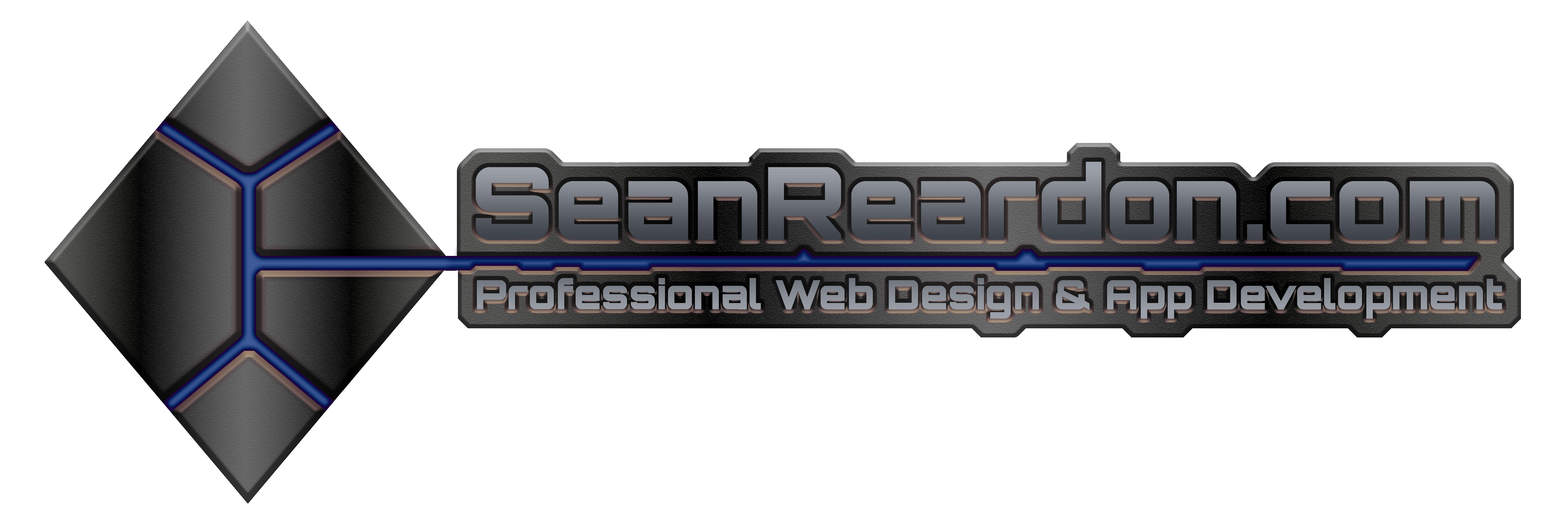
<style>
.page{position:relative;width:1568px;height:521px;background:#ffffff}
.page>*{position:absolute;margin:0}
.t1{font:101px "Orbitron-Black"}
.t2{font:40.4px "Orbitron-Black";color:#8a8e96}
</style>
<div class="page">
<p class="t1" style="left:476px;top:162px;width:1019px;height:78px">SeanReardon.com</p>
<p class="t2" style="left:477px;top:278px;width:1025px;height:41px">Professional Web Design &amp; App Development</p>
</div>
